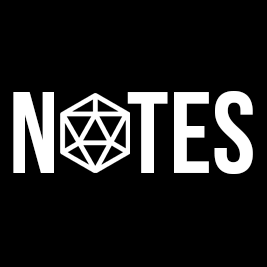
<style>
.page{position:relative;width:267px;height:267px;background:#000000}
.page>*{position:absolute;margin:0}
.t1{font:116px "BebasNeue";color:#ffffff}
</style>
<div class="page">
<p class="t1" style="left:13px;top:92px;width:41px;height:81px">n</p>
<p class="t1" style="left:13px;top:92px;width:41px;height:81px">n</p>
<p class="t1" style="left:127px;top:91px;width:126px;height:83px">tes</p>
<p class="t1" style="left:127px;top:91px;width:126px;height:83px">tes</p>
</div>
